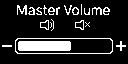
<style>
.page{position:relative;width:128px;height:64px;background:#000000}
.page>*{position:absolute;margin:0}
.t1{font:14px "GothicA1-Regular";color:#ffffff}
</style>
<div class="page">
<p class="t1" style="left:17px;top:4px;width:93px;height:12px">Master Volume</p>
</div>
